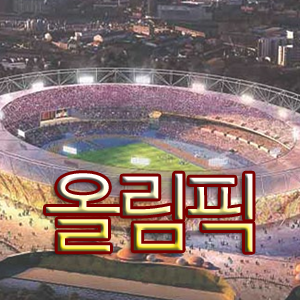
<style>
.page{position:relative;width:300px;height:300px}
.page>*{position:absolute;margin:0}
.t1{font:84.9px "NanumBarunGothic";letter-spacing:-0.06em}
</style>
<div class="page">
<p class="t1" style="left:46px;top:173px;width:207px;height:79px">올림픽</p>
</div>
